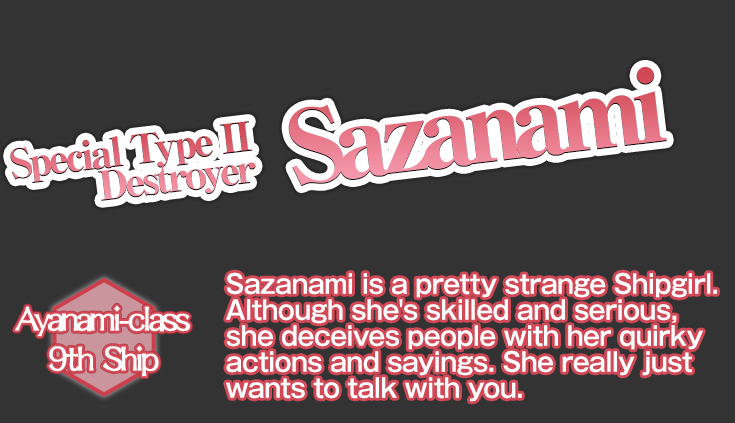
<style>
.page{position:relative;width:735px;height:423px;background:#333333}
.page>*{position:absolute;margin:0}
.t1{font:100px "RyuminPro-ExHeavy";letter-spacing:-0.1em}
.t2{font:26px/26px "GothicMB101Pro-DeBold";letter-spacing:-0.02em;color:#fdfdfd;scale:0.95 1}
.t3{font:40px/40px "DFLungMen-W9-WINP-BF";letter-spacing:-0.09em;color:#fdfdfd}
</style>
<div class="page">
<p class="t1" style="left:288px;top:67px;width:379px;height:120px;rotate:-7deg">Sazanami</p>
<p class="t2" style="left:226px;top:272px;width:491px;height:130px">Sazanami is a pretty strange Shipgirl.<br>Although she's skilled and serious,<br>she deceives people with her quirky<br>actions and sayings. She really just<br>wants to talk with you.</p>
<p class="t3" style="left:14px;top:305px;width:176px;height:72px;text-align:center">Ayanami-class<br>9th Ship</p>
</div>
